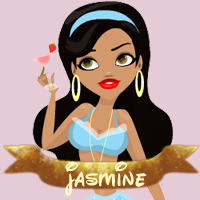
<style>
.page{position:relative;width:200px;height:200px;background:#e4cbd6}
.page>*{position:absolute;margin:0}
.t1{font:37.4px "Waltograph";color:#fcfac7}
</style>
<div class="page">
<p class="t1" style="left:65px;top:161px;width:82px;height:35px">jasmine</p>
</div>
